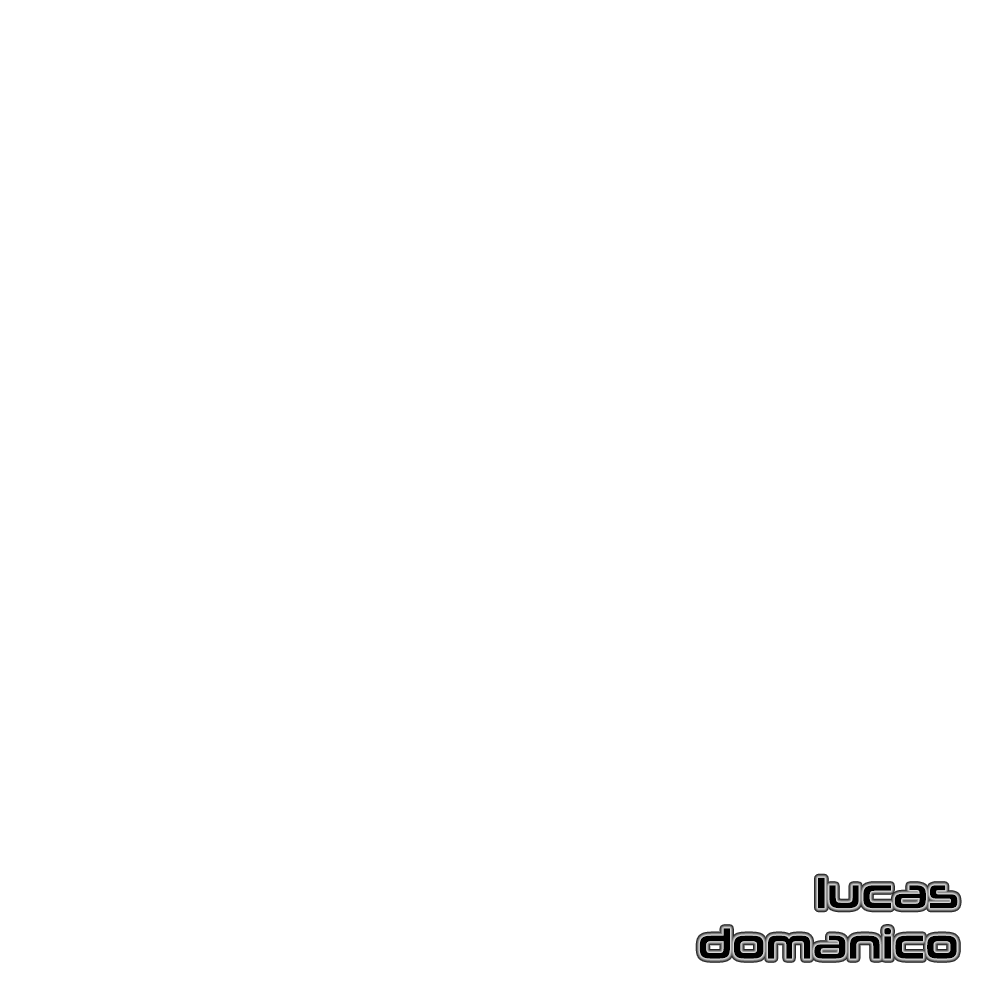
<style>
.page{position:relative;width:1000px;height:1000px;background:#ffffff}
.page>*{position:absolute;margin:0}
.t1{font:42px "NeuropoliticalRg-Regular";color:#000000}
</style>
<div class="page">
<p class="t1" style="left:699px;top:877px;width:259px;height:82px;text-align:right">lucas<br>domanico</p>
</div>
